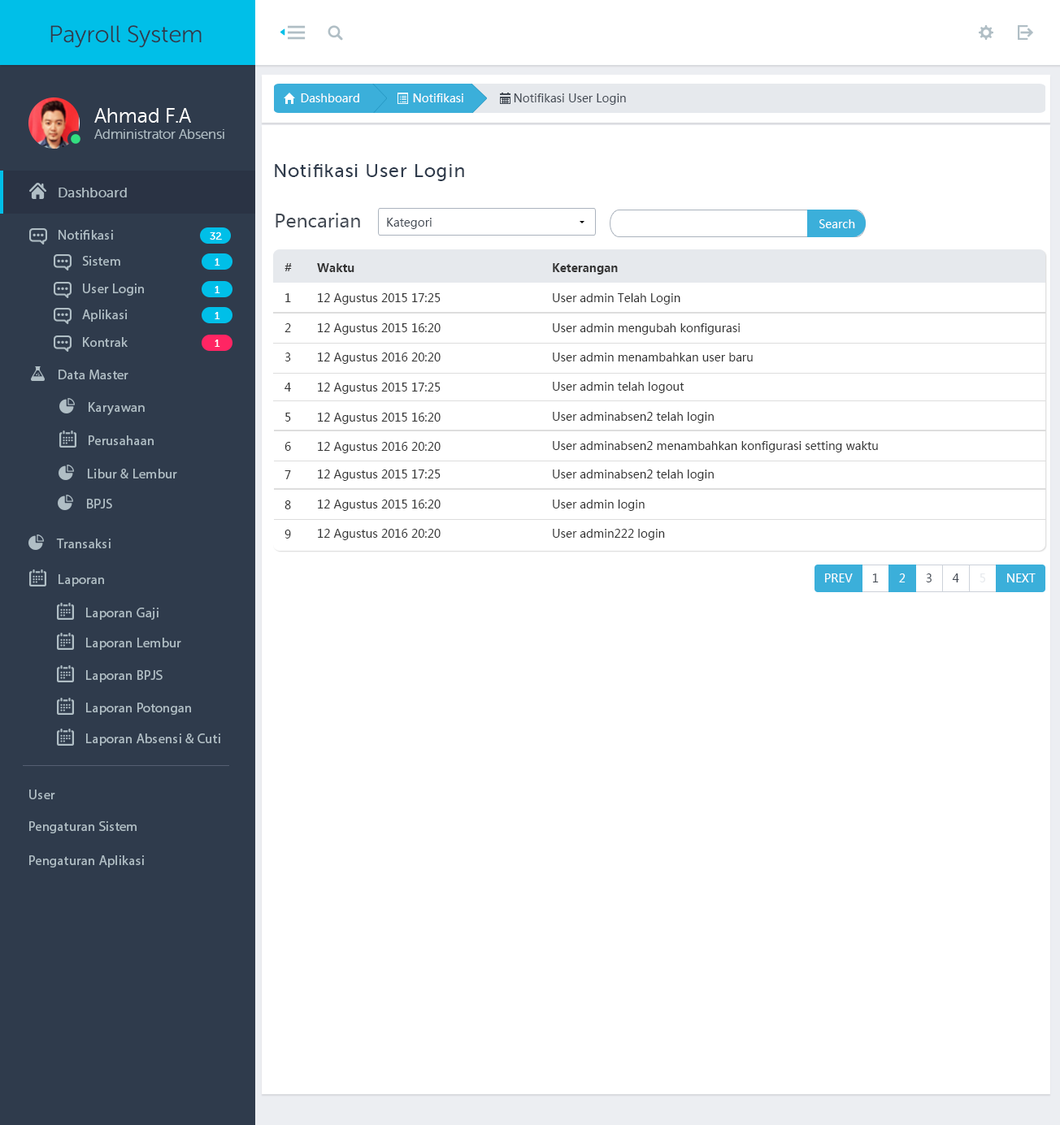
<style>
.page{position:relative;width:1060px;height:1125px;background:#ffffff}
.page>*{position:absolute;margin:0}
.t1{font:23.7px "MuseoSansRounded-300";color:#2f3b4c}
.t2{font:11.4px "MicrosoftYaHei";color:#ffffff}
.t3{font:11.4px "MicrosoftYaHei";color:#434a54}
.t4{font:13.5px "MuseoSansRounded-300";color:#b0bec5}
.t5{font:20.3px "MuseoSansRounded-300";color:#ffffff}
.t6{font:18.6px "MuseoSans-500";letter-spacing:0.04em;color:#2f3b4c}
.t7{font:13.5px "MuseoSans-500";letter-spacing:0.02em;color:#b0bec5}
.t8{font:18.6px "MicrosoftYaHei";color:#434a54}
.t9{font:13.5px "MyriadPro-Regular";letter-spacing:0.02em;color:#b0bec5}
.t10{font:10.2px "MuseoSans-500";letter-spacing:0.02em;color:#ffffff}
.t11{font:11.4px "MicrosoftYaHei-Bold";color:#333333}
.t12{font:11.4px "MicrosoftYaHei";color:#333333}
.t13{font:11.4px "MicrosoftYaHei";color:#e6e9ed}
</style>
<div class="page">
<p class="t1" style="left:50px;top:25px;width:152px;height:23px">Payroll System</p>
<p class="t2" style="left:301px;top:93px;width:58px;height:9px">Dashboard</p>
<p class="t2" style="left:413px;top:93px;width:50px;height:9px">Notifikasi</p>
<p class="t3" style="left:514px;top:93px;width:112px;height:12px">Notifikasi User Login</p>
<p class="t4" style="left:94px;top:108px;width:130px;height:31px"><span class="t5">Ahmad F.A <br></span>Administrator Absensi</p>
<p class="t6" style="left:275px;top:164px;width:189px;height:17px">Notifikasi User Login</p>
<p class="t7" style="left:59px;top:188px;width:68px;height:9px">Dashboard</p>
<p class="t8" style="left:275px;top:213px;width:85px;height:15px">Pencarian</p>
<p class="t3" style="left:387px;top:218px;width:44px;height:11px">Kategori</p>
<p class="t2" style="left:819px;top:219px;width:36px;height:9px">Search</p>
<p class="t9" style="left:59px;top:230px;width:54px;height:10px">Notifikasi</p>
<p class="t10" style="left:210px;top:232px;width:12px;height:8px">32</p>
<p class="t9" style="left:82px;top:256px;width:38px;height:10px">Sistem</p>
<p class="t10" style="left:215px;top:258px;width:5px;height:8px">1</p>
<p class="t11" style="left:284px;top:263px;width:8px;height:8px">#</p>
<p class="t11" style="left:317px;top:263px;width:37px;height:9px">Waktu</p>
<p class="t11" style="left:553px;top:263px;width:65px;height:12px">Keterangan</p>
<p class="t9" style="left:83px;top:284px;width:61px;height:12px">User Login</p>
<p class="t10" style="left:215px;top:286px;width:5px;height:7px">1</p>
<p class="t12" style="left:285px;top:293px;width:6px;height:9px">1</p>
<p class="t12" style="left:318px;top:293px;width:122px;height:12px">12 Agustus 2015 17:25</p>
<p class="t12" style="left:553px;top:293px;width:127px;height:12px">User admin Telah Login</p>
<p class="t9" style="left:82px;top:310px;width:46px;height:12px">Aplikasi</p>
<p class="t10" style="left:215px;top:312px;width:5px;height:7px">1</p>
<p class="t12" style="left:284px;top:323px;width:7px;height:9px">2</p>
<p class="t12" style="left:318px;top:323px;width:122px;height:12px">12 Agustus 2015 16:20</p>
<p class="t12" style="left:553px;top:323px;width:186px;height:12px">User admin mengubah konfigurasi</p>
<p class="t9" style="left:83px;top:337px;width:45px;height:10px">Kontrak</p>
<p class="t10" style="left:215px;top:340px;width:5px;height:7px">1</p>
<p class="t12" style="left:284px;top:353px;width:7px;height:9px">3</p>
<p class="t12" style="left:318px;top:353px;width:122px;height:11px">12 Agustus 2016 20:20</p>
<p class="t12" style="left:553px;top:353px;width:199px;height:9px">User admin menambahkan user baru</p>
<p class="t9" style="left:59px;top:370px;width:69px;height:9px">Data Master</p>
<p class="t12" style="left:284px;top:383px;width:7px;height:9px">4</p>
<p class="t12" style="left:318px;top:383px;width:122px;height:11px">12 Agustus 2015 17:25</p>
<p class="t12" style="left:553px;top:382px;width:131px;height:11px">User admin telah logout</p>
<p class="t9" style="left:89px;top:402px;width:56px;height:13px">Karyawan</p>
<p class="t12" style="left:285px;top:413px;width:6px;height:9px">5</p>
<p class="t12" style="left:318px;top:413px;width:122px;height:11px">12 Agustus 2015 16:20</p>
<p class="t12" style="left:553px;top:412px;width:160px;height:11px">User adminabsen2 telah login</p>
<p class="t9" style="left:89px;top:436px;width:65px;height:9px">Perusahaan</p>
<p class="t12" style="left:284px;top:442px;width:7px;height:9px">6</p>
<p class="t12" style="left:318px;top:442px;width:122px;height:11px">12 Agustus 2016 20:20</p>
<p class="t12" style="left:553px;top:441px;width:325px;height:12px">User adminabsen2 menambahkan konfigurasi setting waktu</p>
<p class="t9" style="left:88px;top:469px;width:89px;height:10px">Libur &amp; Lembur</p>
<p class="t12" style="left:284px;top:470px;width:7px;height:9px">7</p>
<p class="t12" style="left:318px;top:470px;width:122px;height:11px">12 Agustus 2015 17:25</p>
<p class="t12" style="left:553px;top:470px;width:160px;height:11px">User adminabsen2 telah login</p>
<p class="t9" style="left:87px;top:499px;width:25px;height:10px">BPJS</p>
<p class="t12" style="left:284px;top:501px;width:7px;height:8px">8</p>
<p class="t12" style="left:318px;top:500px;width:122px;height:11px">12 Agustus 2015 16:20</p>
<p class="t12" style="left:553px;top:500px;width:91px;height:11px">User admin login</p>
<p class="t12" style="left:284px;top:530px;width:7px;height:9px">9</p>
<p class="t12" style="left:318px;top:529px;width:122px;height:11px">12 Agustus 2016 20:20</p>
<p class="t12" style="left:553px;top:529px;width:112px;height:11px">User admin222 login</p>
<p class="t9" style="left:56px;top:539px;width:55px;height:9px">Transaksi</p>
<p class="t9" style="left:59px;top:574px;width:45px;height:13px">Laporan</p>
<p class="t2" style="left:825px;top:574px;width:27px;height:9px">PREV</p>
<p class="t3" style="left:872px;top:574px;width:6px;height:9px">1</p>
<p class="t2" style="left:899px;top:574px;width:6px;height:9px">2</p>
<p class="t3" style="left:926px;top:574px;width:5px;height:9px">3</p>
<p class="t3" style="left:952px;top:574px;width:7px;height:9px">4</p>
<p class="t13" style="left:979px;top:574px;width:6px;height:9px">5</p>
<p class="t2" style="left:1007px;top:574px;width:28px;height:9px">NEXT</p>
<p class="t9" style="left:86px;top:608px;width:72px;height:12px">Laporan Gaji</p>
<p class="t9" style="left:86px;top:638px;width:95px;height:12px">Laporan Lembur</p>
<p class="t9" style="left:86px;top:670px;width:77px;height:13px">Laporan BPJS</p>
<p class="t9" style="left:86px;top:703px;width:105px;height:12px">Laporan Potongan</p>
<p class="t9" style="left:86px;top:734px;width:134px;height:12px">Laporan Absensi &amp; Cuti</p>
<p class="t9" style="left:29px;top:790px;width:26px;height:10px">User</p>
<p class="t9" style="left:29px;top:821px;width:108px;height:13px">Pengaturan Sistem</p>
<p class="t9" style="left:29px;top:856px;width:115px;height:12px">Pengaturan Aplikasi</p>
</div>
